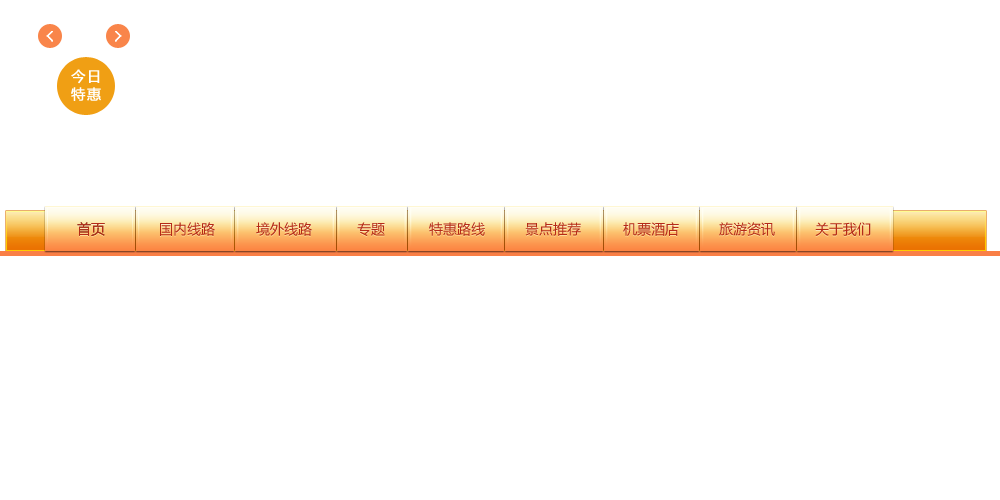
<style>
.page{position:relative;width:1000px;height:500px;background:#ffffff}
.page>*{position:absolute;margin:0}
.t1{font:14px/18px "MicrosoftYaHei";letter-spacing:0.1em;color:#ffffff;font-weight:bold}
.t2{font:14px "MicrosoftYaHei";color:#b52b18}
</style>
<div class="page">
<p class="t1" style="left:71px;top:69px;width:30px;height:32px">今日<br>特惠</p>
<p class="t2" style="left:77px;top:222px;width:28px;height:14px">首页</p>
<p class="t2" style="left:77px;top:222px;width:28px;height:14px">首页</p>
<p class="t2" style="left:160px;top:222px;width:55px;height:14px">国内线路</p>
<p class="t2" style="left:256px;top:222px;width:56px;height:14px">境外线路</p>
<p class="t2" style="left:357px;top:222px;width:28px;height:14px">专题</p>
<p class="t2" style="left:429px;top:222px;width:56px;height:14px">特惠路线</p>
<p class="t2" style="left:525px;top:222px;width:56px;height:14px">景点推荐</p>
<p class="t2" style="left:623px;top:222px;width:56px;height:14px">机票酒店</p>
<p class="t2" style="left:719px;top:222px;width:56px;height:14px">旅游资讯</p>
<p class="t2" style="left:815px;top:222px;width:56px;height:14px">关于我们</p>
</div>
